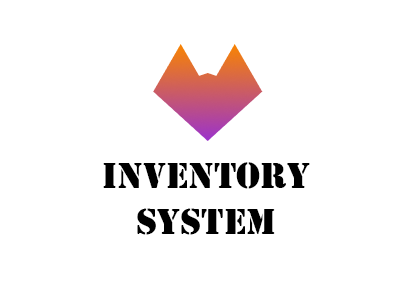
<style>
.page{position:relative;width:416px;height:281px;background:#ffffff}
.page>*{position:absolute;margin:0}
.t1{font:38px "Stencil";color:#000000}
</style>
<div class="page">
<p class="t1" style="left:103px;top:162px;width:207px;height:73px;text-align:center">INVENTORY<br>SYSTEM</p>
</div>
